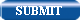
<style>
.page{position:relative;width:80px;height:20px;background:#0b5299}
.page>*{position:absolute;margin:0}
.t1{font:12px "TimesNewRomanPS-BoldMT";color:#ffffff}
</style>
<div class="page">
<p class="t1" style="left:16px;top:6px;width:46px;height:9px">SUBMIT</p>
</div>
